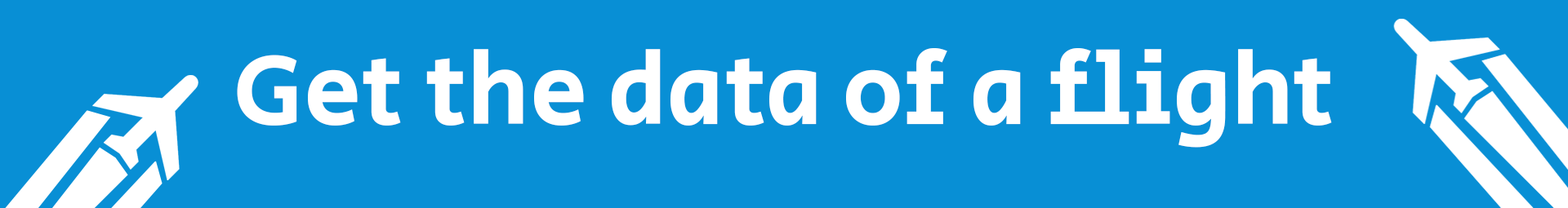
<style>
.page{position:relative;width:1568px;height:208px;background:#088fd5}
.page>*{position:absolute;margin:0}
.t1{font:102.1px "SecularOne-Regular";color:#ffffff}
</style>
<div class="page">
<p class="t1" style="left:237px;top:48px;width:1095px;height:100px">Get the data of a flight</p>
</div>
